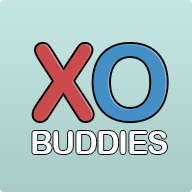
<style>
.page{position:relative;width:192px;height:192px}
.page>*{position:absolute;margin:0}
.t1{font:104px "ArialRoundedMTBold";letter-spacing:-0.04em;color:#cb4b4b;text-transform:uppercase}
.t2{font:104px "ArialRoundedMTBold";letter-spacing:-0.04em;color:#4390c6;text-transform:uppercase}
.t3{font:32px "ArialRoundedMTBold";letter-spacing:-0.04em;color:#ffffff;text-transform:uppercase}
</style>
<div class="page">
<p class="t1" style="left:33px;top:44px;width:134px;height:77px">X<span class="t2">O</span></p>
<p class="t3" style="left:32px;top:131px;width:135px;height:23px">BUDDIES</p>
</div>
